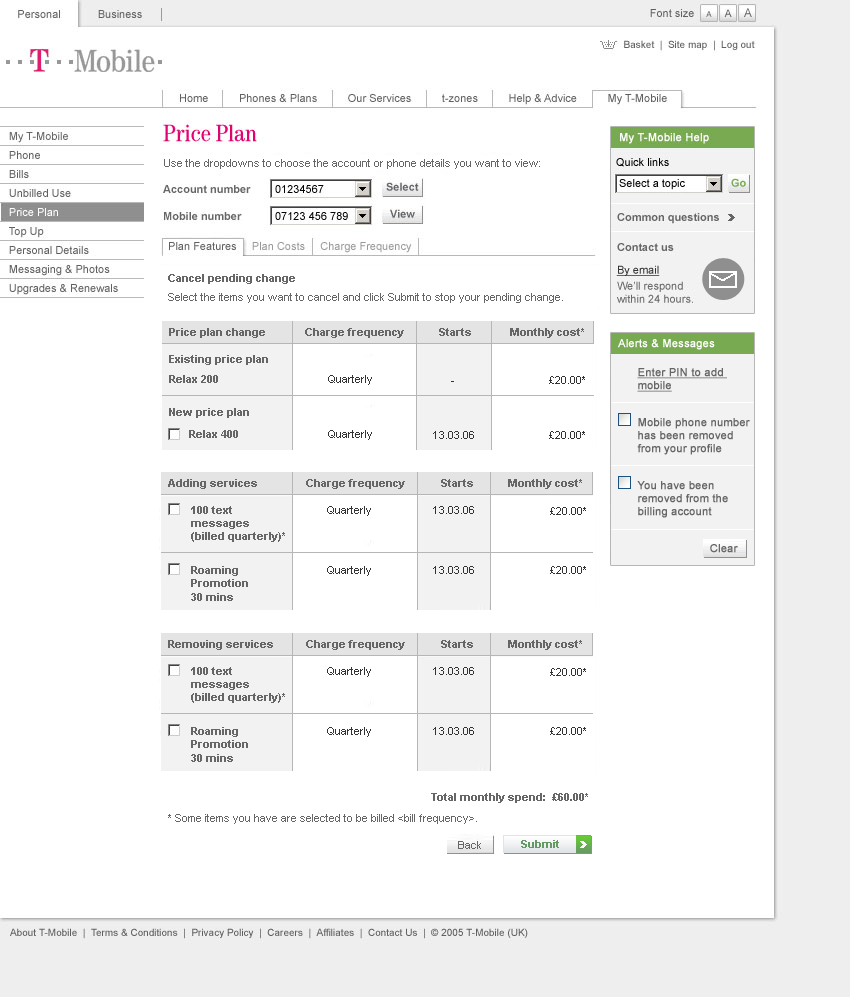
<style>
.page{position:relative;width:850px;height:997px;background:#ffffff}
.page>*{position:absolute;margin:0}
.t1{font:11px "ArialMT";color:#666666}
.t2{font:11px "Arial-BoldMT";color:#666666}
.t3{font:11px "ArialMT";color:#ffffff;font-weight:bold}
.t4{font:11px "ArialMT";color:#333333}
.t5{font:11px "ArialMT";color:#666666;font-weight:bold;text-decoration:underline}
.t6{font:11px "ArialMT";color:#666666;font-weight:bold}
.t7{font:11px/21px "Arial-BoldMT";color:#666666}
.t8{font:11px "Arial-BoldMT";color:#669a65}
</style>
<div class="page">
<p class="t1" style="left:164px;top:159px;width:376px;height:10px">Use the dropdowns to choose the account or phone details you want to view:</p>
<p class="t2" style="left:168px;top:274px;width:127px;height:10px">Cancel pending change</p>
<p class="t1" style="left:168px;top:293px;width:395px;height:10px">Select the items you want to cancel and click Submit to stop your pending change.</p>
<p class="t2" style="left:169px;top:328px;width:96px;height:10px">Price plan change</p>
<p class="t2" style="left:305px;top:328px;width:99px;height:10px">Charge frequency</p>
<p class="t2" style="left:439px;top:328px;width:32px;height:8px">Starts</p>
<p class="t2" style="left:510px;top:328px;width:74px;height:10px">Monthly cost*</p>
<p class="t3" style="left:618px;top:339px;width:97px;height:11px">Alerts &amp; Messages</p>
<p class="t2" style="left:169px;top:355px;width:99px;height:10px">Existing price plan</p>
<p class="t2" style="left:169px;top:375px;width:49px;height:8px">Relax 200</p>
<p class="t4" style="left:328px;top:375px;width:44px;height:10px">Quarterly</p>
<p class="t4" style="left:549px;top:376px;width:36px;height:8px">£20.00*</p>
<p class="t5" style="left:637px;top:368px;width:90px;height:24px">Enter PIN to add <br>mobile</p>
<p class="t2" style="left:169px;top:408px;width:80px;height:10px">New price plan</p>
<p class="t6" style="left:637px;top:418px;width:113px;height:37px">Mobile phone number <br>has been removed <br>from your profile</p>
<p class="t2" style="left:189px;top:430px;width:49px;height:8px">Relax 400</p>
<p class="t4" style="left:328px;top:430px;width:44px;height:10px">Quarterly</p>
<p class="t4" style="left:433px;top:431px;width:41px;height:8px">13.03.06</p>
<p class="t4" style="left:549px;top:431px;width:36px;height:8px">£20.00*</p>
<p class="t2" style="left:168px;top:479px;width:89px;height:10px">Adding services</p>
<p class="t2" style="left:306px;top:479px;width:99px;height:10px">Charge frequency</p>
<p class="t2" style="left:441px;top:479px;width:32px;height:8px">Starts</p>
<p class="t2" style="left:508px;top:479px;width:74px;height:10px">Monthly cost*</p>
<p class="t6" style="left:637px;top:481px;width:91px;height:37px">You have been <br>removed from the <br>billing account</p>
<p class="t2" style="left:191px;top:506px;width:94px;height:95px">100 text <br>messages <br>(billed quarterly)*<br><br><span class="t7">Roaming <br></span>Promotion<br>30 mins</p>
<p class="t4" style="left:327px;top:506px;width:44px;height:10px">Quarterly</p>
<p class="t4" style="left:433px;top:506px;width:41px;height:8px">13.03.06</p>
<p class="t4" style="left:550px;top:507px;width:36px;height:8px">£20.00*</p>
<p class="t6" style="left:710px;top:544px;width:28px;height:9px">Clear</p>
<p class="t4" style="left:327px;top:566px;width:44px;height:10px">Quarterly</p>
<p class="t4" style="left:433px;top:566px;width:41px;height:8px">13.03.06</p>
<p class="t4" style="left:550px;top:566px;width:36px;height:8px">£20.00*</p>
<p class="t2" style="left:168px;top:640px;width:105px;height:10px">Removing services</p>
<p class="t2" style="left:306px;top:640px;width:99px;height:10px">Charge frequency</p>
<p class="t2" style="left:441px;top:640px;width:32px;height:8px">Starts</p>
<p class="t2" style="left:508px;top:640px;width:74px;height:10px">Monthly cost*</p>
<p class="t2" style="left:191px;top:667px;width:94px;height:95px">100 text <br>messages <br>(billed quarterly)*<br><br><span class="t7">Roaming <br></span>Promotion<br>30 mins</p>
<p class="t4" style="left:327px;top:667px;width:44px;height:10px">Quarterly</p>
<p class="t4" style="left:433px;top:667px;width:41px;height:8px">13.03.06</p>
<p class="t4" style="left:550px;top:668px;width:36px;height:8px">£20.00*</p>
<p class="t4" style="left:327px;top:727px;width:44px;height:10px">Quarterly</p>
<p class="t4" style="left:433px;top:727px;width:41px;height:8px">13.03.06</p>
<p class="t4" style="left:550px;top:727px;width:36px;height:8px">£20.00*</p>
<p class="t2" style="left:431px;top:793px;width:157px;height:10px">Total monthly spend:  £60.00*</p>
<p class="t1" style="left:168px;top:814px;width:309px;height:10px">* Some items you have are selected to be billed &lt;bill frequency&gt;.</p>
<p class="t1" style="left:458px;top:841px;width:23px;height:8px">Back</p>
<p class="t8" style="left:521px;top:840px;width:38px;height:8px">Submit</p>
</div>
